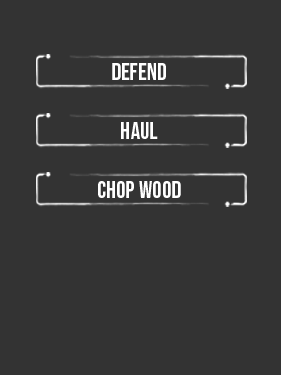
<style>
.page{position:relative;width:281px;height:375px;background:#333333}
.page>*{position:absolute;margin:0}
.t1{font:24px "BebasNeue-Regular";color:#ffffff}
</style>
<div class="page">
<p class="t1" style="left:112px;top:63px;width:54px;height:17px">Defend</p>
<p class="t1" style="left:121px;top:122px;width:37px;height:17px">HAUL</p>
<p class="t1" style="left:98px;top:181px;width:83px;height:17px">CHOP Wood</p>
</div>
